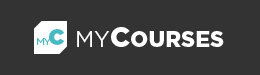
<style>
.page{position:relative;width:260px;height:75px;background:#333333}
.page>*{position:absolute;margin:0}
.t1{font:22px "Gotham-Ultra";color:#47bac1}
.t2{font:22px "Gotham-Black";color:#ffffff}
.t3{font:22px "Gotham-Book";color:#ffffff}
.t4{font:28px "Gotham-Black";color:#ffffff}
.t5{font:10px "Gotham-Book";letter-spacing:-0.12em;color:#47bac1}
</style>
<div class="page">
<p class="t1" style="left:49px;top:29px;width:16px;height:16px">C</p>
<p class="t2" style="left:77px;top:27px;width:147px;height:20px"><span class="t3">MY</span><span class="t4">C</span>OURSES</p>
<p class="t5" style="left:37px;top:38px;width:14px;height:7px">MY</p>
</div>
